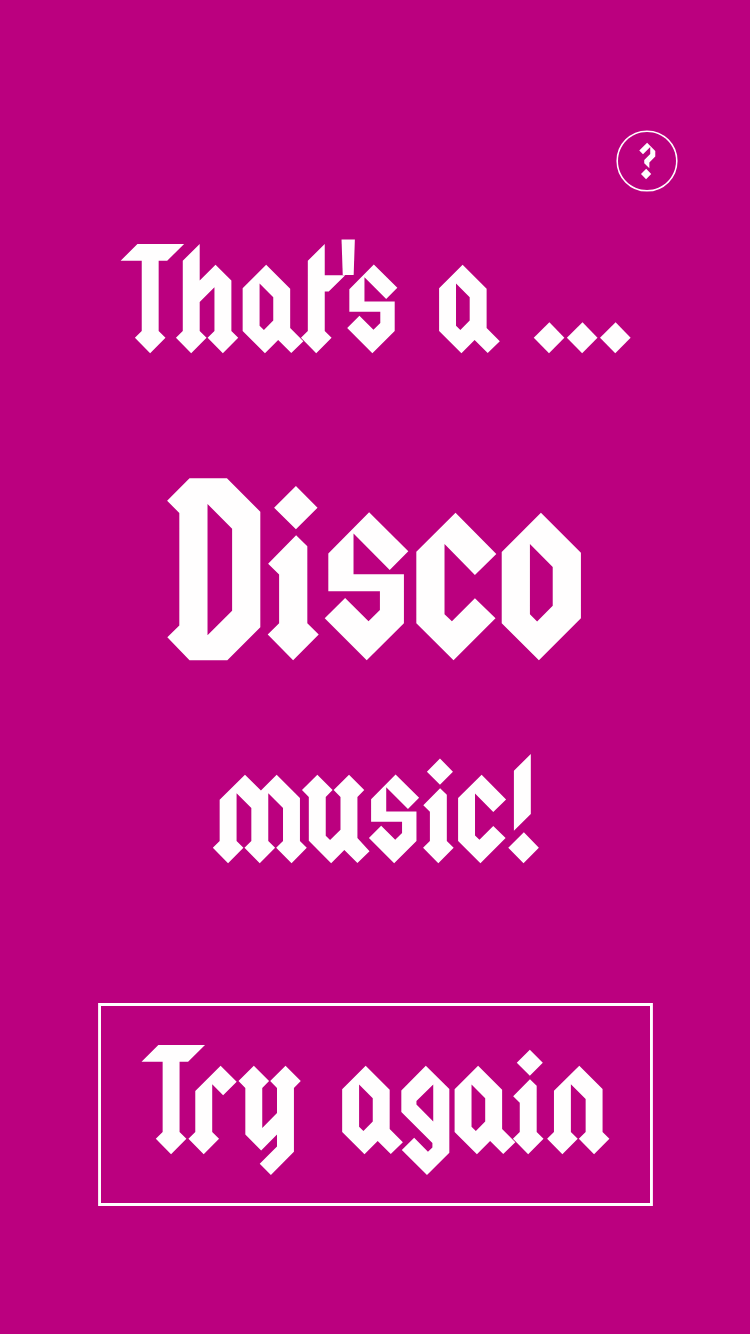
<style>
.page{position:relative;width:750px;height:1334px;background:#bb007f}
.page>*{position:absolute;margin:0}
.t1{font:40px "Squealer";color:#fffefe}
.t2{font:120px "Squealer";color:#fffefe}
.t3{font:200px "Squealer";color:#fffefe}
</style>
<div class="page">
<p class="t1" style="left:639px;top:142px;width:17px;height:38px">?</p>
<p class="t2" style="left:120px;top:239px;width:511px;height:115px">That's a ...</p>
<p class="t3" style="left:167px;top:478px;width:414px;height:183px">Disco</p>
<p class="t2" style="left:212px;top:753px;width:327px;height:111px">music!</p>
<p class="t2" style="left:141px;top:1044px;width:469px;height:132px">Try again</p>
</div>
